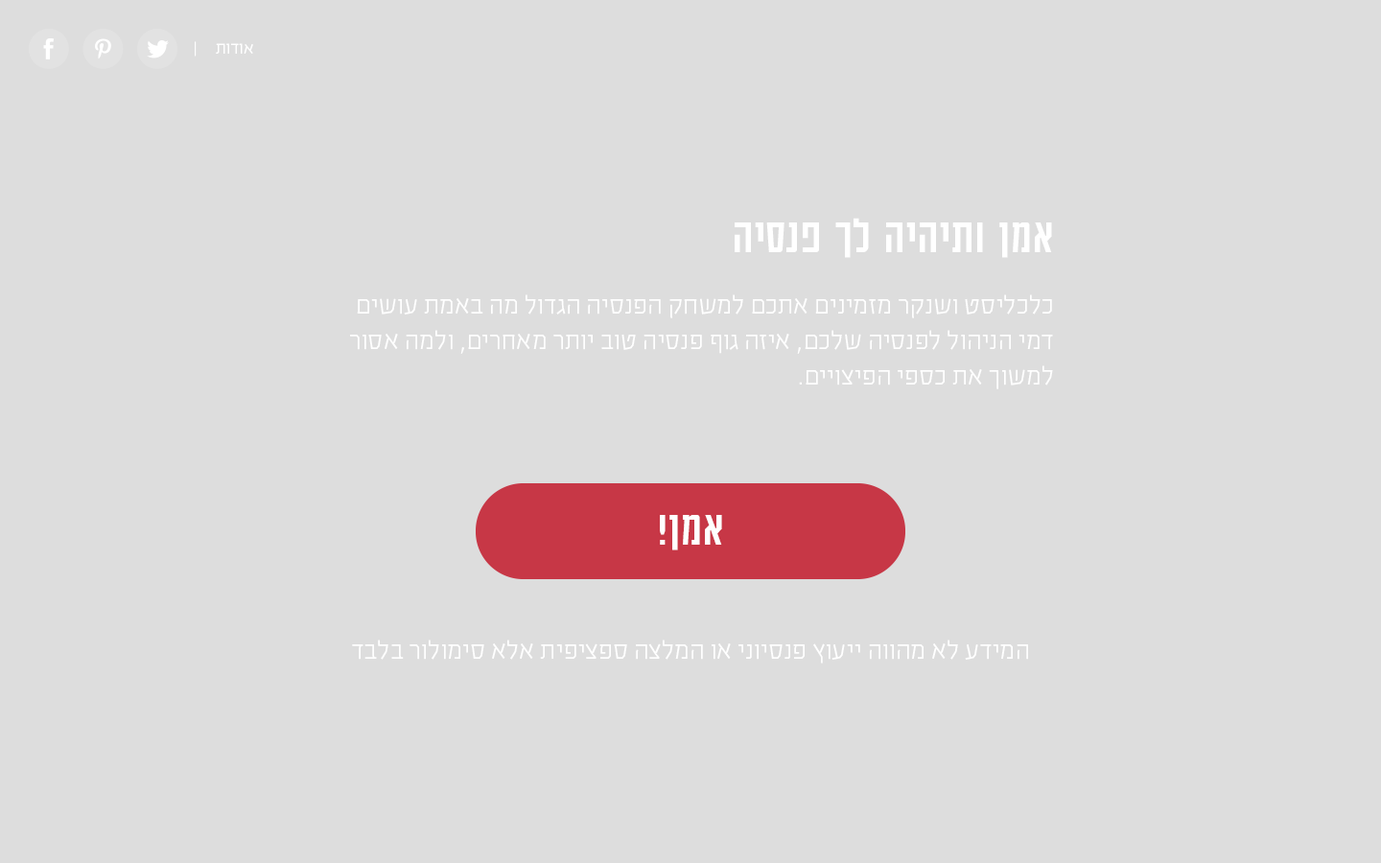
<style>
.page{position:relative;width:1381px;height:863px;background:#dddddd}
.page>*{position:absolute;margin:0}
.t1{font:19.2px "EzerBlock_OE-Light";color:#ffffff}
.t2{font:53.8px "AdumaFOT-Regular";color:#ffffff}
.t3{font:28.8px/35.5px "EzerBlock_OE-Light";color:#ffffff}
.t4{font:28.8px "EzerBlock_OE-Light";color:#ffffff}
</style>
<div class="page">
<p class="t1" style="left:195px;top:41px;width:58px;height:16px">אודות     |</p>
<p class="t2" style="left:735px;top:218px;width:317px;height:40px">אמן ותיהיה לך פנסיה</p>
<p class="t3" style="left:350px;top:294px;width:703px;height:95px">כלכליסט ושנקר מזמינים אתכם למשחק הפנסיה הגדול מה באמת עושים דמי הניהול לפנסיה שלכם, איזה גוף פנסיה טוב יותר מאחרים, ולמה אסור למשוך את כספי הפיצויים.</p>
<p class="t2" style="left:660px;top:515px;width:62px;height:36px">אמן!</p>
<p class="t4" style="left:352px;top:640px;width:676px;height:24px">המידע לא מהווה ייעוץ פנסיוני או המלצה ספציפית אלא סימולור בלבד</p>
</div>
